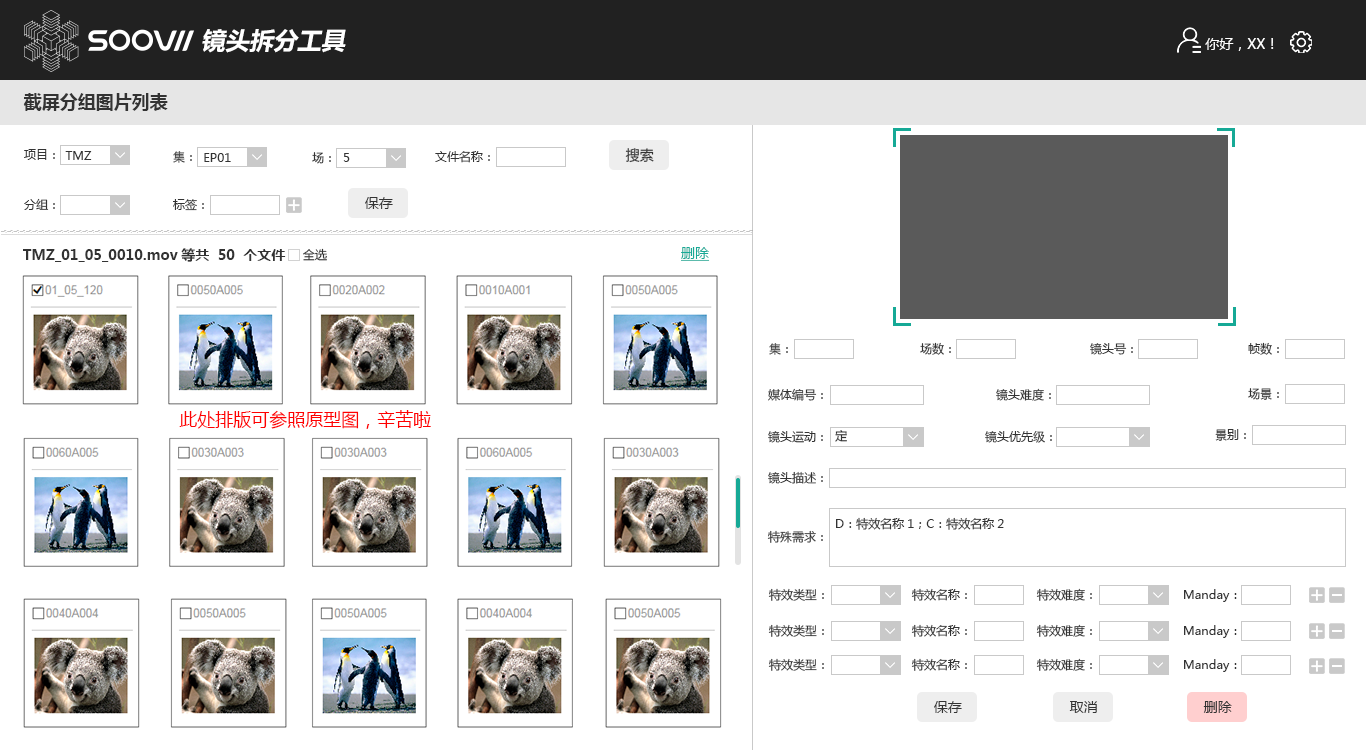
<style>
.page{position:relative;width:1366px;height:750px;background:#ffffff}
.page>*{position:absolute;margin:0}
.t1{font:24px "MicrosoftYaHei-Bold";color:#ffffff;font-style:italic}
.t2{font:14px "MicrosoftYaHei";color:#ffffff}
.t3{font:18px "MicrosoftYaHei-Bold";color:#333333}
.t4{font:12px "MicrosoftYaHei";color:#333333}
.t5{font:14px "MicrosoftYaHei";color:#333333}
.t6{font:12px "MicrosoftYaHei"}
.t7{font:14px "MicrosoftYaHei-Bold";color:#333333}
.t8{font:14px "MicrosoftYaHei";color:#16a996;text-decoration:underline}
.t9{font:18px "MicrosoftYaHei";color:#fe0000}
</style>
<div class="page">
<p class="t1" style="left:202px;top:29px;width:144px;height:24px">镜头拆分工具</p>
<p class="t2" style="left:1205px;top:38px;width:69px;height:13px">你好，XX！</p>
<p class="t3" style="left:23px;top:93px;width:145px;height:18px">截屏分组图片列表</p>
<p class="t4" style="left:24px;top:149px;width:31px;height:11px">项目：</p>
<p class="t5" style="left:625px;top:148px;width:29px;height:15px">搜索</p>
<p class="t4" style="left:65px;top:151px;width:27px;height:9px">TMZ</p>
<p class="t6" style="left:173px;top:151px;width:19px;height:12px">集：</p>
<p class="t4" style="left:204px;top:153px;width:27px;height:9px">EP01</p>
<p class="t4" style="left:312px;top:152px;width:19px;height:12px">场：</p>
<p class="t4" style="left:343px;top:153px;width:7px;height:9px">5</p>
<p class="t4" style="left:435px;top:151px;width:55px;height:12px">文件名称：</p>
<p class="t4" style="left:24px;top:198px;width:31px;height:12px">分组：</p>
<p class="t5" style="left:365px;top:197px;width:28px;height:12px">保存</p>
<p class="t4" style="left:173px;top:199px;width:31px;height:12px">标签：</p>
<p class="t7" style="left:23px;top:248px;width:263px;height:14px">TMZ_01_05_0010.mov等共  50  个文件</p>
<p class="t4" style="left:303px;top:248px;width:24px;height:13px">全选</p>
<p class="t8" style="left:681px;top:247px;width:29px;height:14px">删除</p>
<p class="t4" style="left:920px;top:342px;width:31px;height:13px">场数：</p>
<p class="t4" style="left:1248px;top:342px;width:31px;height:13px">帧数：</p>
<p class="t6" style="left:769px;top:343px;width:19px;height:12px">集：</p>
<p class="t4" style="left:1090px;top:343px;width:43px;height:12px">镜头号：</p>
<p class="t4" style="left:768px;top:388px;width:55px;height:13px">媒体编号：</p>
<p class="t4" style="left:996px;top:388px;width:55px;height:13px">镜头难度：</p>
<p class="t4" style="left:1248px;top:388px;width:31px;height:12px">场景：</p>
<p class="t9" style="left:179px;top:410px;width:252px;height:19px">此处排版可参照原型图，辛苦啦</p>
<p class="t4" style="left:768px;top:431px;width:55px;height:12px">镜头运动：</p>
<p class="t4" style="left:835px;top:430px;width:12px;height:12px">定</p>
<p class="t4" style="left:985px;top:431px;width:67px;height:12px">镜头优先级：</p>
<p class="t4" style="left:1215px;top:429px;width:31px;height:12px">景别：</p>
<p class="t4" style="left:768px;top:471px;width:55px;height:13px">镜头描述：</p>
<p class="t4" style="left:836px;top:517px;width:168px;height:13px">D：特效名称1；C：特效名称2</p>
<p class="t4" style="left:767px;top:530px;width:56px;height:13px">特殊需求：</p>
<p class="t4" style="left:768px;top:588px;width:56px;height:13px">特效类型：</p>
<p class="t4" style="left:911px;top:588px;width:56px;height:13px">特效名称：</p>
<p class="t4" style="left:1036px;top:588px;width:56px;height:13px">特效难度：</p>
<p class="t4" style="left:1184px;top:589px;width:53px;height:13px">Manday：</p>
<p class="t4" style="left:768px;top:624px;width:56px;height:13px">特效类型：</p>
<p class="t4" style="left:911px;top:624px;width:56px;height:13px">特效名称：</p>
<p class="t4" style="left:1036px;top:624px;width:56px;height:13px">特效难度：</p>
<p class="t4" style="left:1184px;top:625px;width:53px;height:13px">Manday：</p>
<p class="t4" style="left:768px;top:658px;width:56px;height:13px">特效类型：</p>
<p class="t4" style="left:911px;top:658px;width:56px;height:13px">特效名称：</p>
<p class="t4" style="left:1036px;top:658px;width:56px;height:13px">特效难度：</p>
<p class="t4" style="left:1184px;top:659px;width:53px;height:13px">Manday：</p>
<p class="t5" style="left:934px;top:701px;width:28px;height:12px">保存</p>
<p class="t5" style="left:1069px;top:701px;width:28px;height:12px">取消</p>
<p class="t5" style="left:1203px;top:701px;width:29px;height:12px">删除</p>
</div>
